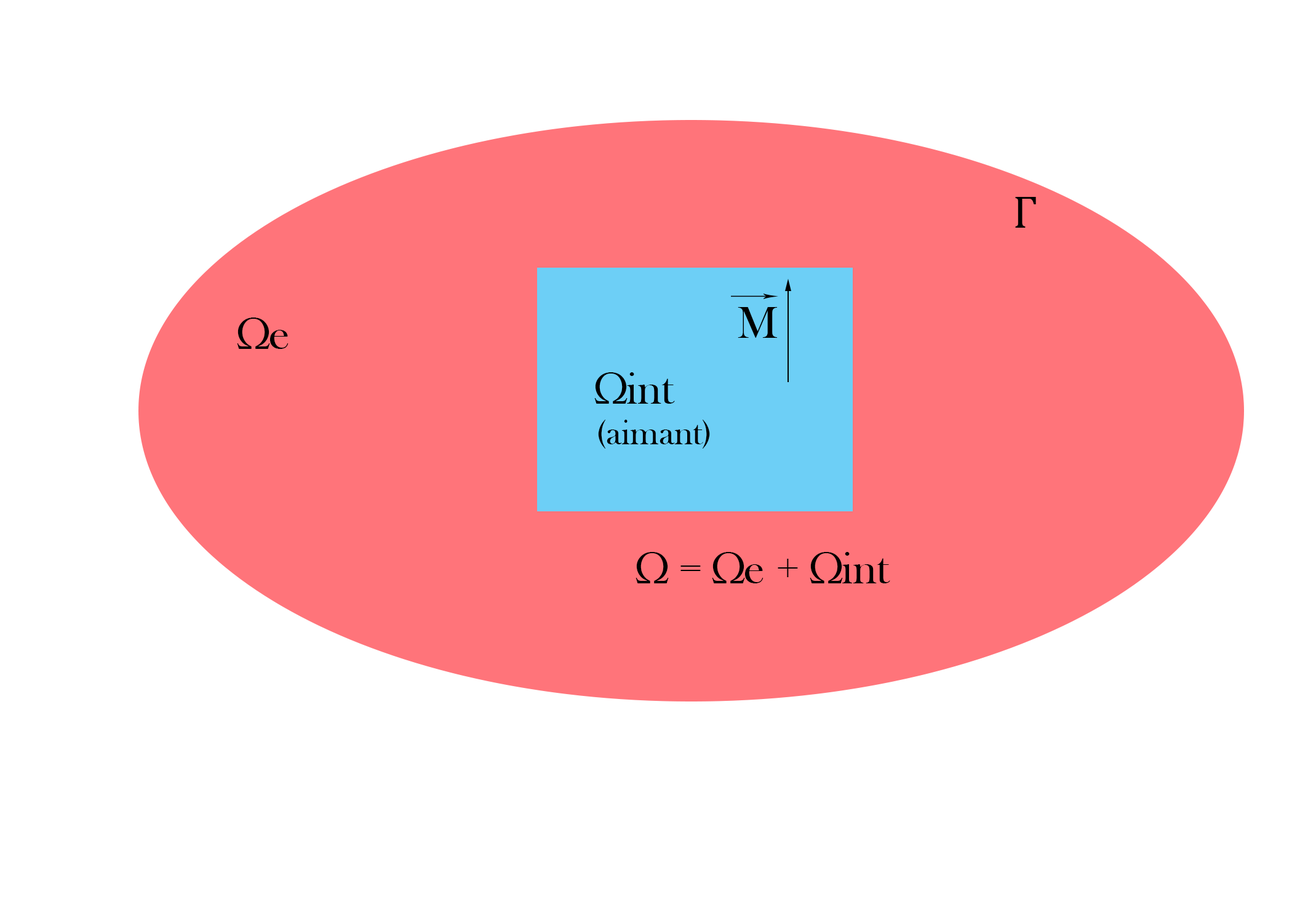
<style>
.page{position:relative;width:1292px;height:923px;background:#ffffff}
.page>*{position:absolute;margin:0}
.t1{font:46.1px "Cambria";color:#000000}
.t2{font:46.1px "BaskOldFace";color:#000000}
.t3{font:35.9px "BaskOldFace";color:#000000}
</style>
<div class="page">
<p class="t1" style="left:1015px;top:197px;width:21px;height:31px">Γ</p>
<p class="t2" style="left:237px;top:317px;width:52px;height:32px">Ωe</p>
<p class="t2" style="left:738px;top:307px;width:39px;height:31px">M</p>
<p class="t2" style="left:594px;top:372px;width:81px;height:32px">Ωint</p>
<p class="t3" style="left:598px;top:420px;width:112px;height:29px">(aimant)</p>
<p class="t2" style="left:636px;top:552px;width:254px;height:31px">Ω = Ωe + Ωint</p>
</div>
